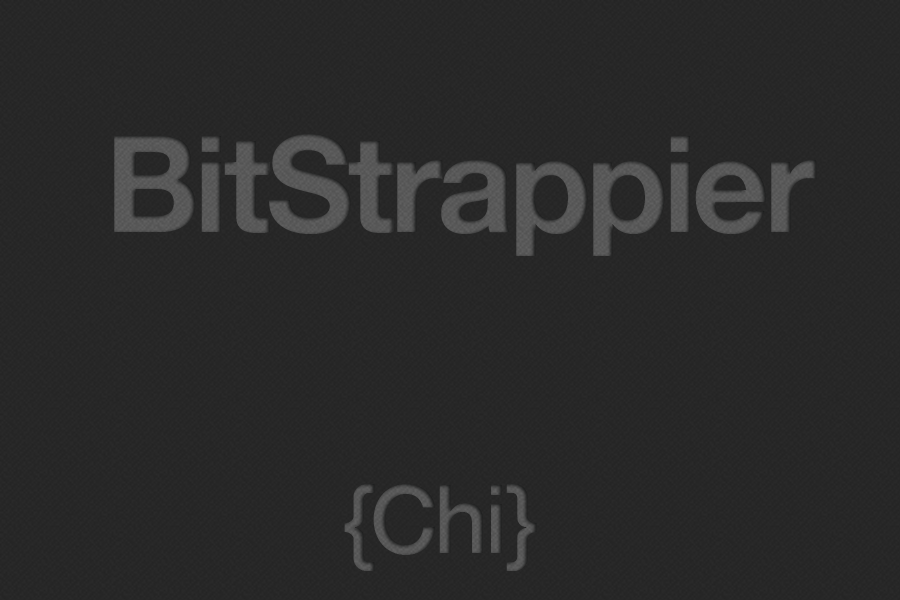
<style>
.page{position:relative;width:900px;height:600px;background:#272727}
.page>*{position:absolute;margin:0}
.t1{font:134.7px "HelveticaNeue-Bold";letter-spacing:-0.04em;color:#575757}
.t2{font:94.7px "HelveticaNeue-Medium";letter-spacing:-0.04em;color:#545454}
</style>
<div class="page">
<p class="t1" style="left:114px;top:134px;width:703px;height:122px">BitStrappier</p>
<p class="t2" style="left:344px;top:484px;width:193px;height:87px">{Chi}</p>
</div>
